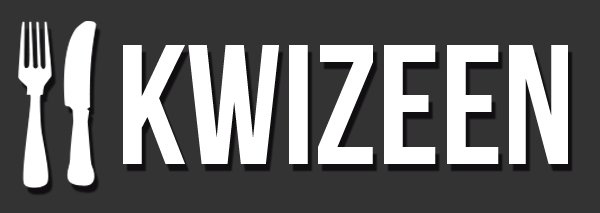
<style>
.page{position:relative;width:600px;height:213px;background:#333333}
.page>*{position:absolute;margin:0}
.t1{font:170px "BebasNeue";color:#ffffff}
</style>
<div class="page">
<p class="t1" style="left:123px;top:45px;width:445px;height:119px">kwizeen</p>
</div>
